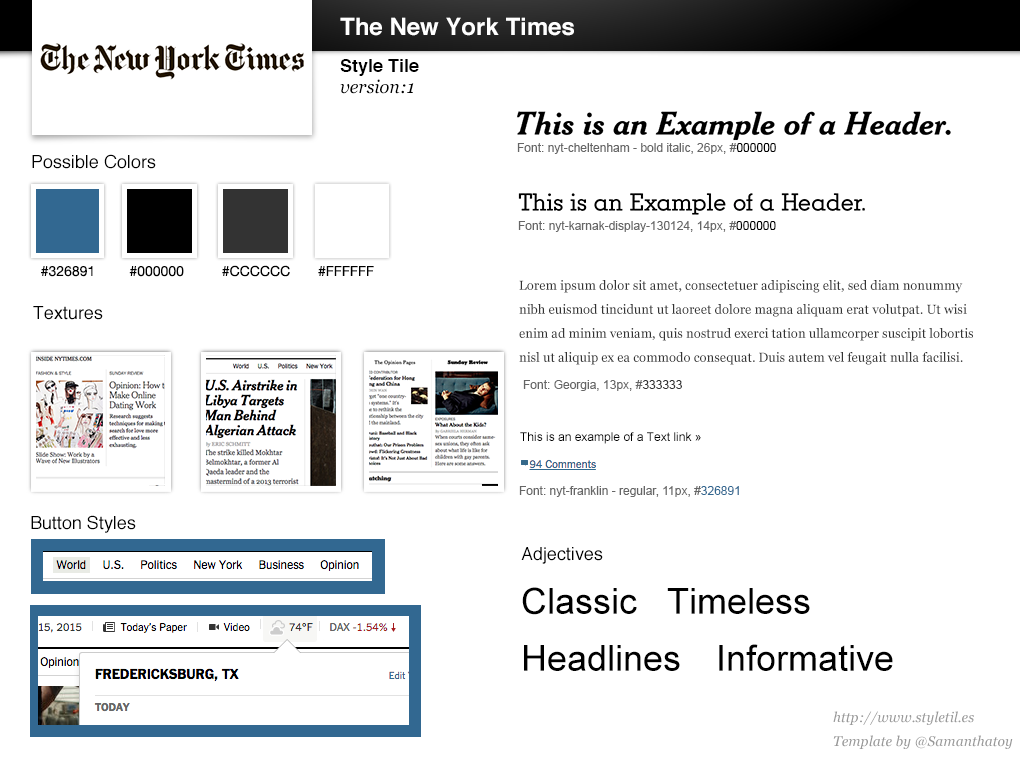
<style>
.page{position:relative;width:1020px;height:760px;background:#ffffff}
.page>*{position:absolute;margin:0}
.t1{font:24px "Helvetica-Bold";color:#ffffff}
.t2{font:18px "Helvetica-Bold";color:#000000}
.t3{font:18px "Georgia-Italic";color:#000000}
.t4{font:12px "ArialMT";color:#666666}
.t5{font:12px "ArialMT";color:#000000}
.t6{font:18px "Helvetica";color:#000000}
.t7{font:14px "HelveticaNeue";color:#000000}
.t8{font:13px/24px "Georgia";color:#333333}
.t9{font:12px "ArialMT";color:#333333}
.t10{font:12px "ArialMT";color:#326891}
.t11{font:36px "ArialMT";color:#000000}
.t12{font:14px/24px "Georgia-Italic";color:#999999}
</style>
<div class="page">
<p class="t1" style="left:340px;top:17px;width:234px;height:19px">The New York Times</p>
<p class="t2" style="left:340px;top:59px;width:79px;height:17px">Style Tile</p>
<p class="t3" style="left:340px;top:79px;width:74px;height:15px">version:1</p>
<p class="t4" style="left:517px;top:143px;width:259px;height:11px">Font: nyt-cheltenham - bold italic, 26px, #<span class="t5">000000</span></p>
<p class="t6" style="left:32px;top:154px;width:124px;height:15px">Possible Colors</p>
<p class="t4" style="left:518px;top:221px;width:258px;height:11px">Font: nyt-karnak-display-130124, 14px, #<span class="t5">000000</span></p>
<p class="t7" style="left:41px;top:266px;width:52px;height:11px">#326891</p>
<p class="t7" style="left:129px;top:266px;width:55px;height:11px">#000000</p>
<p class="t7" style="left:222px;top:265px;width:68px;height:12px">#CCCCCC</p>
<p class="t7" style="left:318px;top:266px;width:56px;height:10px">#FFFFFF</p>
<p class="t8" style="left:519px;top:280px;width:454px;height:85px">Lorem ipsum dolor sit amet, consectetuer adipiscing elit, sed diam nonummy nibh euismod tincidunt ut laoreet dolore magna aliquam erat volutpat. Ut wisi enim ad minim veniam, quis nostrud exerci tation ullamcorper suscipit lobortis nisl ut aliquip ex ea commodo consequat. Duis autem vel feugait nulla facilisi.</p>
<p class="t6" style="left:33px;top:306px;width:70px;height:14px">Textures</p>
<p class="t4" style="left:523px;top:380px;width:159px;height:11px">Font: Georgia, 13px, #<span class="t9">333333</span></p>
<p class="t5" style="left:520px;top:432px;width:181px;height:12px">This is an example of a Text link »</p>
<p class="t4" style="left:519px;top:486px;width:220px;height:11px">Font: nyt-franklin - regular, 11px, #<span class="t10">326891</span></p>
<p class="t6" style="left:31px;top:515px;width:105px;height:18px">Button Styles</p>
<p class="t6" style="left:521px;top:547px;width:82px;height:17px">Adjectives</p>
<p class="t11" style="left:522px;top:587px;width:115px;height:28px">Classic</p>
<p class="t11" style="left:667px;top:588px;width:143px;height:26px">Timeless</p>
<p class="t11" style="left:524px;top:645px;width:156px;height:26px">Headlines</p>
<p class="t11" style="left:719px;top:644px;width:174px;height:27px">Informative</p>
<p class="t12" style="left:833px;top:711px;width:180px;height:38px">http://www.styletil.es<br>Template by @Samanthatoy</p>
</div>
